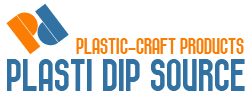
<style>
.page{position:relative;width:250px;height:98px;background:#ffffff}
.page>*{position:absolute;margin:0}
.t1{font:39px "PlasterCaster";color:#3172a3;text-transform:uppercase}
.t2{font:39px "PlasterCaster";color:#fb7d04;text-transform:uppercase}
.t3{font:24px "Elbaris";color:#fb7d04;text-transform:uppercase}
.t4{font:47px "Elbaris";color:#3172a3;text-transform:uppercase}
</style>
<div class="page">
<p class="t1" style="left:35px;top:3px;width:34px;height:43px;rotate:143deg">P</p>
<p class="t2" style="left:6px;top:12px;width:35px;height:43px;rotate:-38deg">p</p>
<p class="t3" style="left:76px;top:38px;width:168px;height:16px">plastic-craft products</p>
<p class="t4" style="left:7px;top:59px;width:238px;height:32px">PLASTI DIP SOURCE</p>
</div>
